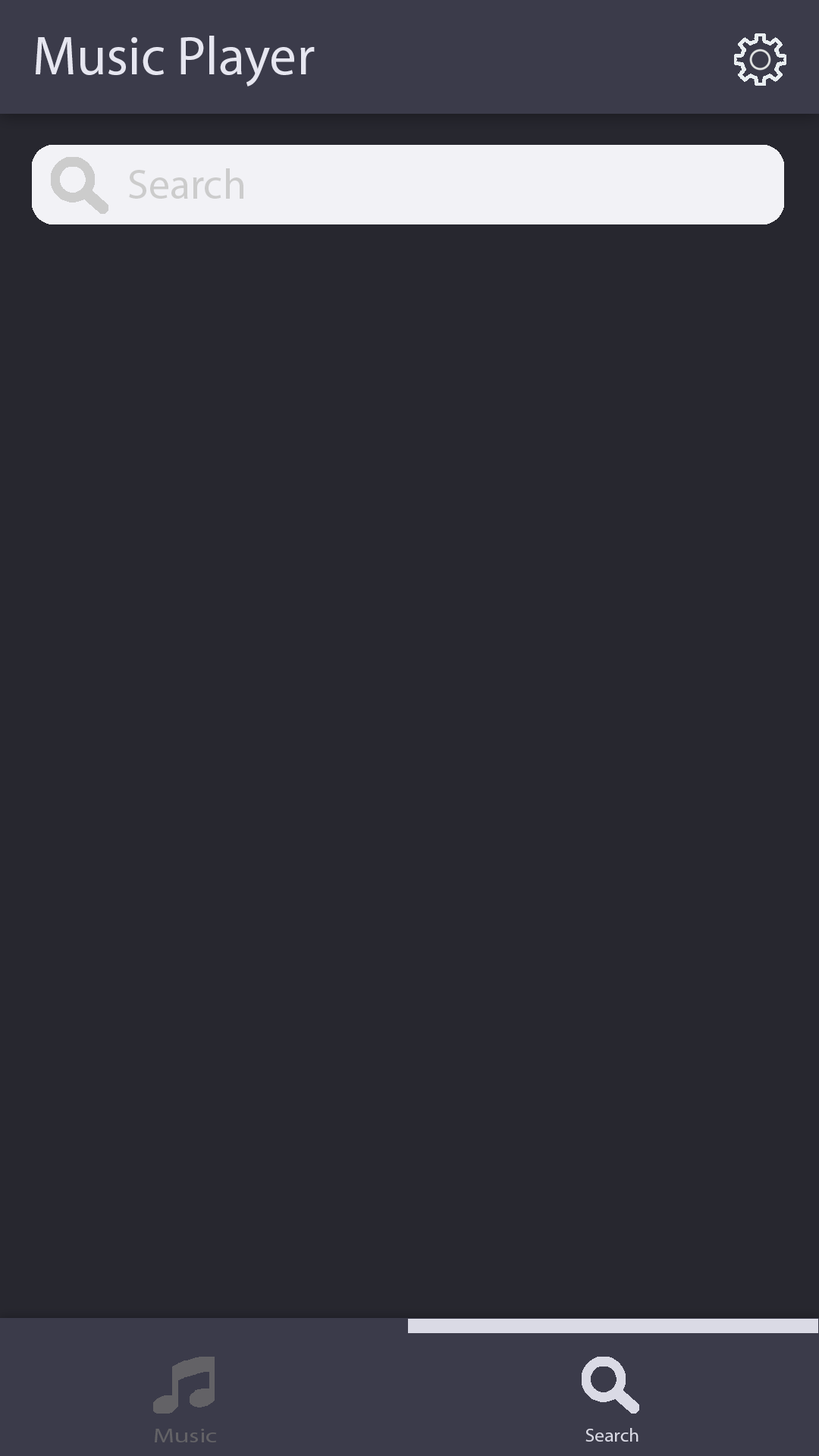
<style>
.page{position:relative;width:819px;height:1456px;background:#27272f}
.page>*{position:absolute;margin:0}
.t1{font:54.6px "MyriadPro-Regular";color:#e6e6f0}
.t2{font:42.5px "MyriadPro-Regular";color:#cccccc}
.t3{font:19.4px "MyriadPro-Regular";color:#636266;scale:1.36 1}
.t4{font:18.6px "MyriadPro-Regular";color:#d9d9e4;scale:1.05 1}
</style>
<div class="page">
<p class="t1" style="left:36px;top:36px;width:279px;height:50px">Music Player</p>
<p class="t2" style="left:129px;top:168px;width:114px;height:31px">Search</p>
<p class="t3" style="left:155px;top:1429px;width:62px;height:13px">Music</p>
<p class="t4" style="left:585px;top:1428px;width:54px;height:14px">Search</p>
</div>
